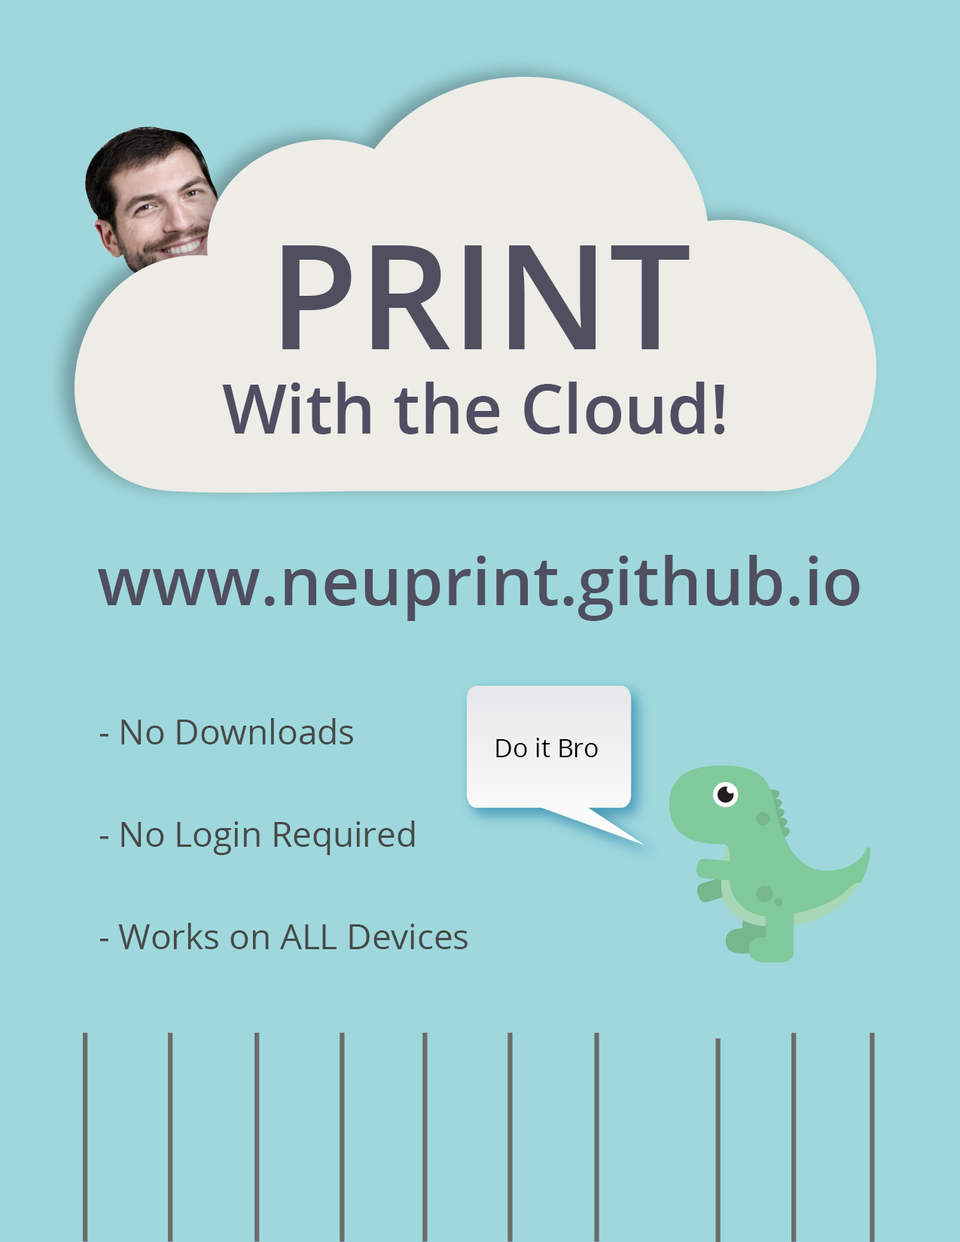
<style>
.page{position:relative;width:960px;height:1242px;background:#9ed8dd}
.page>*{position:absolute;margin:0}
.t1{font:145.5px "OpenSans-Semibold";color:#504f5f}
.t2{font:68.2px "OpenSans-Semibold";color:#504e62}
.t3{font:66.6px "OpenSans-Semibold";color:#504f5f}
.t4{font:34.5px "OpenSans";color:#474947}
.t5{font:25.5px "OpenSans";color:#000000}
</style>
<div class="page">
<p class="t1" style="left:282px;top:245px;width:408px;height:104px">PRINT</p>
<p class="t2" style="left:222px;top:382px;width:503px;height:52px">With the Cloud!</p>
<p class="t3" style="left:97px;top:555px;width:763px;height:66px">www.neuprint.github.io</p>
<p class="t4" style="left:99px;top:718px;width:254px;height:27px">- No Downloads</p>
<p class="t5" style="left:496px;top:738px;width:102px;height:19px">Do it Bro</p>
<p class="t4" style="left:99px;top:821px;width:316px;height:34px">- No Login Required</p>
<p class="t4" style="left:99px;top:923px;width:369px;height:26px">- Works on ALL Devices</p>
</div>
